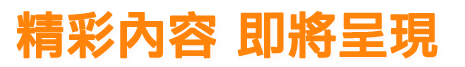
<style>
.page{position:relative;width:465px;height:67px;background:#ffffff}
.page>*{position:absolute;margin:0}
.t1{font:49.5px "LiGothicMed";color:#ff8409;font-weight:bold}
</style>
<div class="page">
<p class="t1" style="left:16px;top:11px;width:422px;height:48px">精彩內容 即將呈現</p>
</div>
